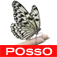
<style>
.page{position:relative;width:57px;height:57px;background:#ffffff}
.page>*{position:absolute;margin:0}
.t1{font:10px "BlairMdITCTTMedium";color:#ffffff}
</style>
<div class="page">
<p class="t1" style="left:6px;top:47px;width:47px;height:9px">POssO</p>
</div>
